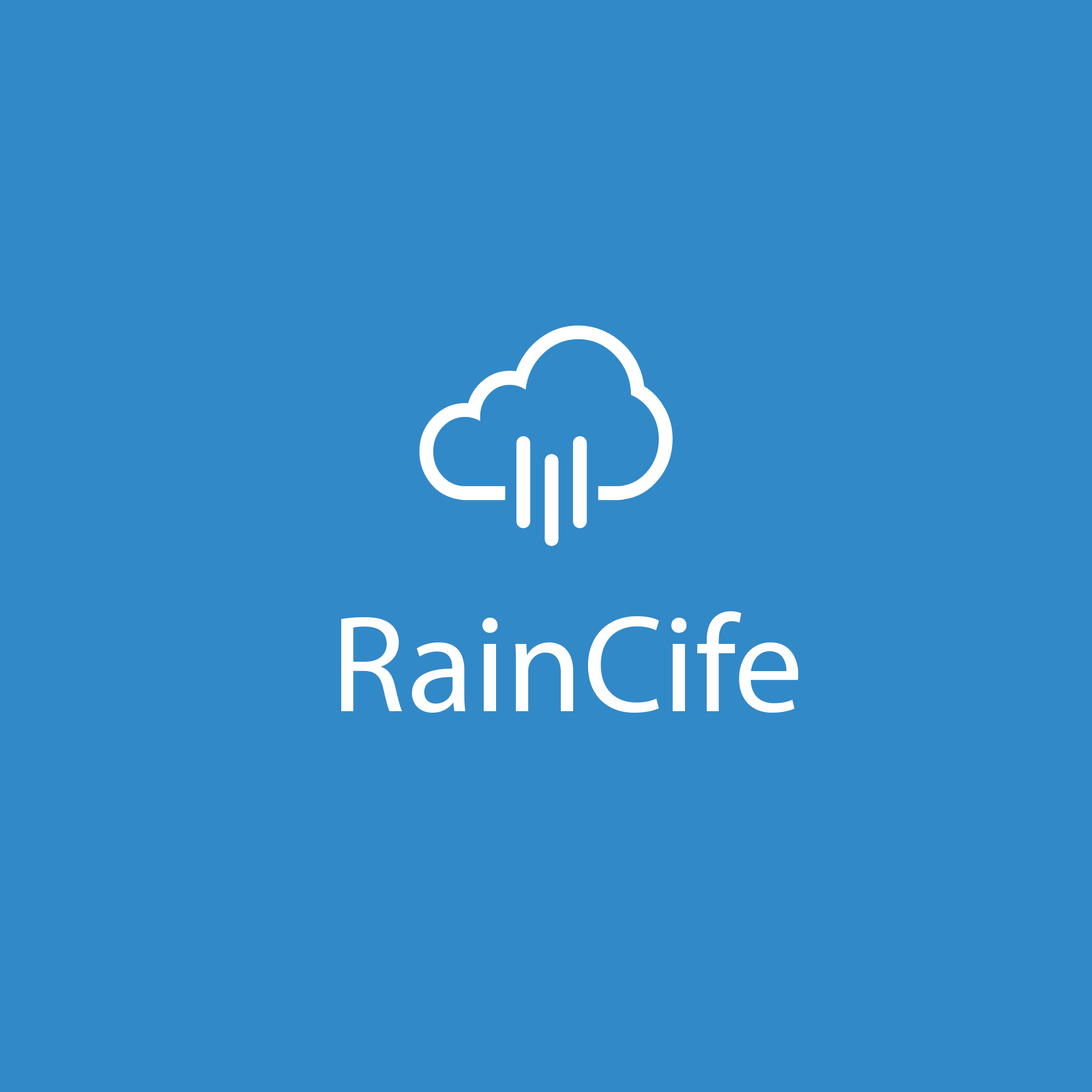
<style>
.page{position:relative;width:1092px;height:1092px;background:#3289c7}
.page>*{position:absolute;margin:0}
.t1{font:138.5px "MyriadPro-Regular";color:#fffefe}
</style>
<div class="page">
<p class="t1" style="left:341px;top:611px;width:457px;height:102px">RainCife</p>
</div>
